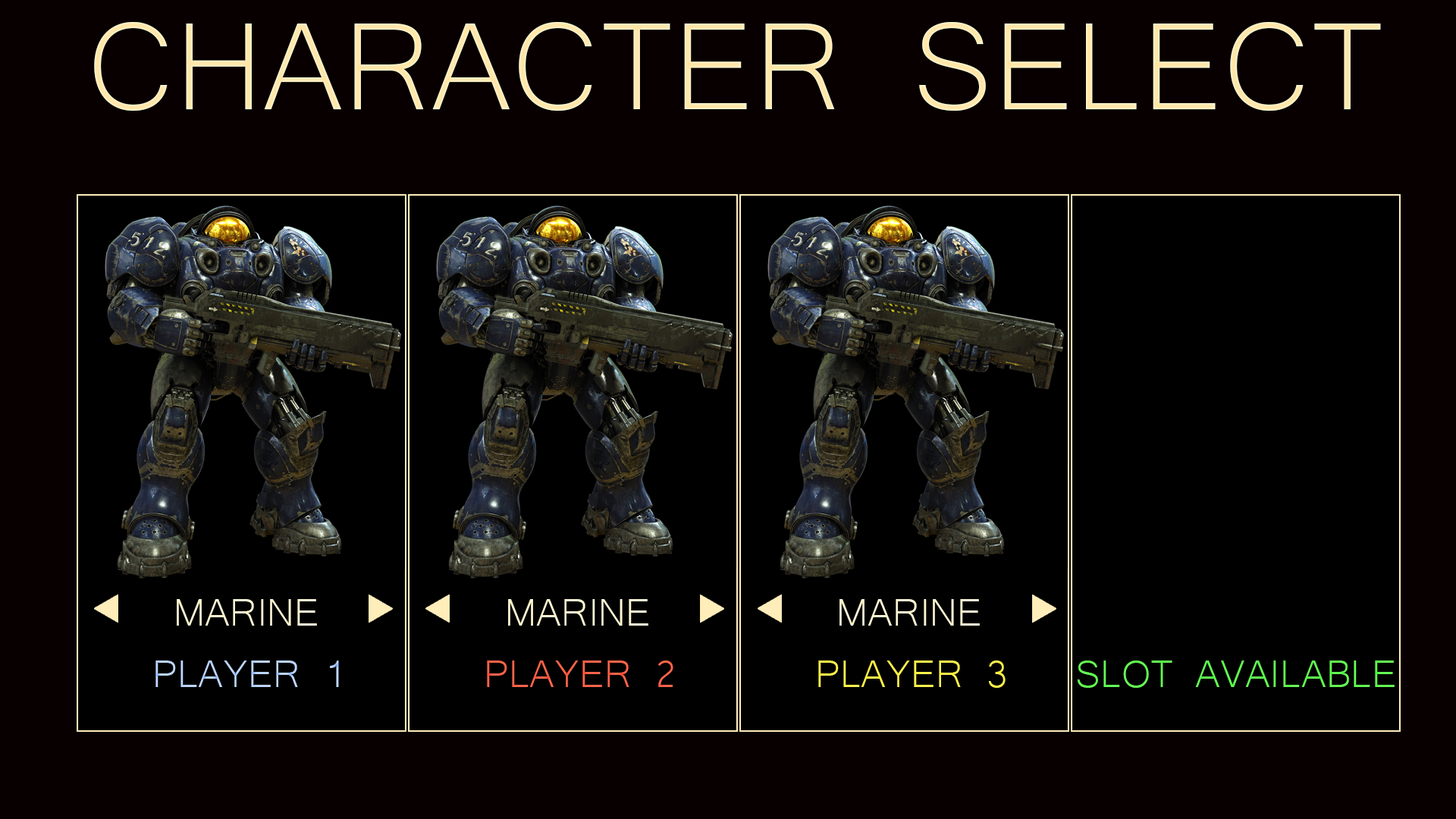
<style>
.page{position:relative;width:1456px;height:819px;background:#000000}
.page>*{position:absolute;margin:0}
.t1{font:159.9px "Microsoft-Yi-Baiti";color:#ffeab2}
.t2{font:49.3px "Microsoft-Yi-Baiti";color:#fff8d7}
.t3{font:49.3px "Microsoft-Yi-Baiti";color:#bfd7ff}
.t4{font:49.3px "Microsoft-Yi-Baiti";color:#ff664c}
.t5{font:49.3px "Microsoft-Yi-Baiti";color:#fff24c}
.t6{font:49.3px "Microsoft-Yi-Baiti";color:#66ff54}
</style>
<div class="page">
<p class="t1" style="left:94px;top:22px;width:1287px;height:89px">CHARACTER SELECT</p>
<p class="t2" style="left:177px;top:599px;width:140px;height:27px">MARINE</p>
<p class="t2" style="left:508px;top:599px;width:140px;height:27px">MARINE</p>
<p class="t2" style="left:839px;top:599px;width:141px;height:27px">MARINE</p>
<p class="t3" style="left:155px;top:660px;width:184px;height:27px">PLAYER 1</p>
<p class="t4" style="left:487px;top:660px;width:186px;height:27px">PLAYER 2</p>
<p class="t5" style="left:818px;top:660px;width:188px;height:28px">PLAYER 3</p>
<p class="t6" style="left:1077px;top:660px;width:318px;height:28px">SLOT AVAILABLE</p>
</div>
